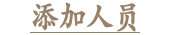
<style>
.page{position:relative;width:170px;height:35px;background:#ffffff}
.page>*{position:absolute;margin:0}
.t1{font:32px "STKaiti-SC-Black";color:#978169;text-decoration:underline;scale:0.86 1}
</style>
<div class="page">
<p class="t1" style="left:30px;top:2px;width:110px;height:31px">添加人员</p>
</div>
